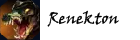
<style>
.page{position:relative;width:140px;height:40px;background:#ffffff}
.page>*{position:absolute;margin:0}
.t1{font:12px "VinerHandITC";color:#000000}
</style>
<div class="page">
<p class="t1" style="left:47px;top:10px;width:72px;height:17px">Renekton</p>
</div>
